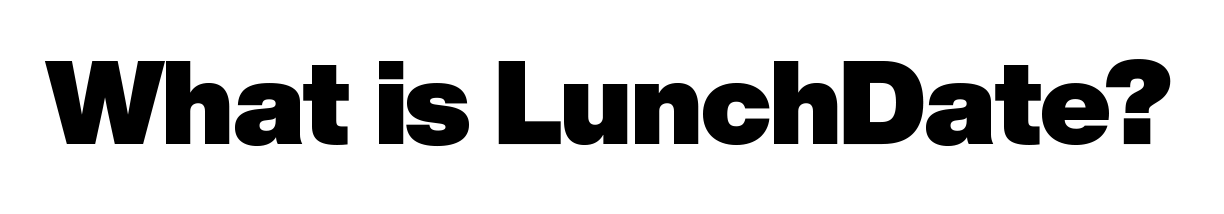
<style>
.page{position:relative;width:1224px;height:214px;background:#ffffff}
.page>*{position:absolute;margin:0}
.t1{font:116.7px "HelveticaNowDisplay-XBlk";letter-spacing:-0.01em;color:#000000}
</style>
<div class="page">
<p class="t1" style="left:44px;top:59px;width:1127px;height:88px">What is LunchDate?</p>
</div>
